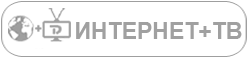
<style>
.page{position:relative;width:250px;height:60px;background:#ffffff}
.page>*{position:absolute;margin:0}
.t1{font:23px "Arial-BoldMT";color:#a0a0a0}
</style>
<div class="page">
<p class="t1" style="left:76px;top:22px;width:166px;height:17px">ИНТЕРНЕТ+ТВ</p>
</div>
